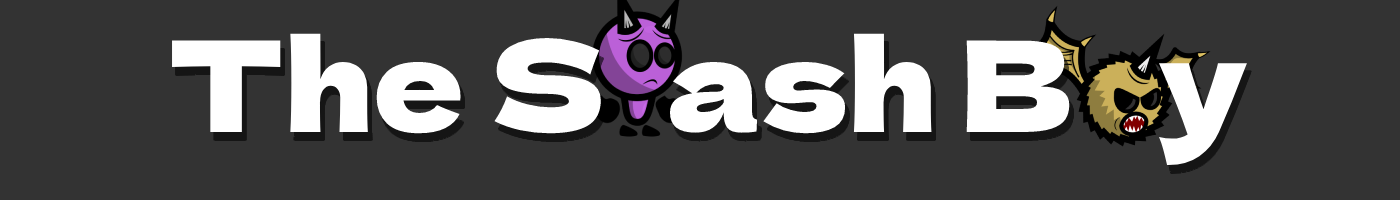
<style>
.page{position:relative;width:1400px;height:200px;background:#333333}
.page>*{position:absolute;margin:0}
.t1{font:126px "DelaGothicOne-Regular";color:#ffffff}
</style>
<div class="page">
<p class="t1" style="left:172px;top:33px;width:1075px;height:133px">The S*ash B . y</p>
</div>
